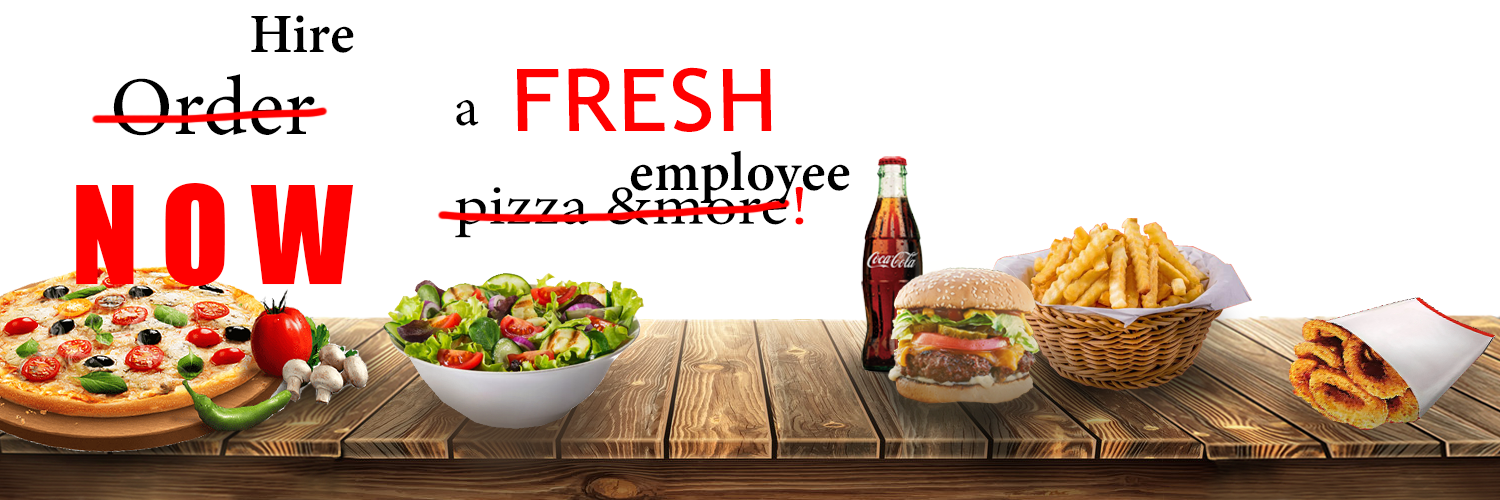
<style>
.page{position:relative;width:1500px;height:500px;background:#ffffff}
.page>*{position:absolute;margin:0}
.t1{font:55.6px "MinionConceptRoman-Semibold";color:#000000}
.t2{font:83.3px "MinionVariableConcept-Roman";color:#000000}
.t3{font:125px "Impact";color:#ff0000}
.t4{font:85.8px "TrebuchetMS";color:#ff0000;font-weight:bold;scale:1.08 1}
.t5{font:55.6px "MinionVariableConcept-Roman";color:#000000}
.t6{font:55.6px "MinionVariableConcept-Roman";color:#000000;scale:1.16 1}
.t7{font:55.6px "MinionVariableConcept-Roman";color:#ff0000;scale:1.16 1}
</style>
<div class="page">
<p class="t1" style="left:251px;top:15px;width:103px;height:38px">Hire</p>
<p class="t2" style="left:76px;top:74px;width:278px;height:212px;text-align:center">Order <br><span class="t3">N O W</span></p>
<p class="t4" style="left:517px;top:67px;width:255px;height:65px">FRESH</p>
<p class="t5" style="left:456px;top:100px;width:23px;height:26px">a</p>
<p class="t1" style="left:630px;top:150px;width:220px;height:54px">employee</p>
<p class="t6" style="left:455px;top:186px;width:349px;height:52px">pizza &amp;more<span class="t7">!</span></p>
</div>
